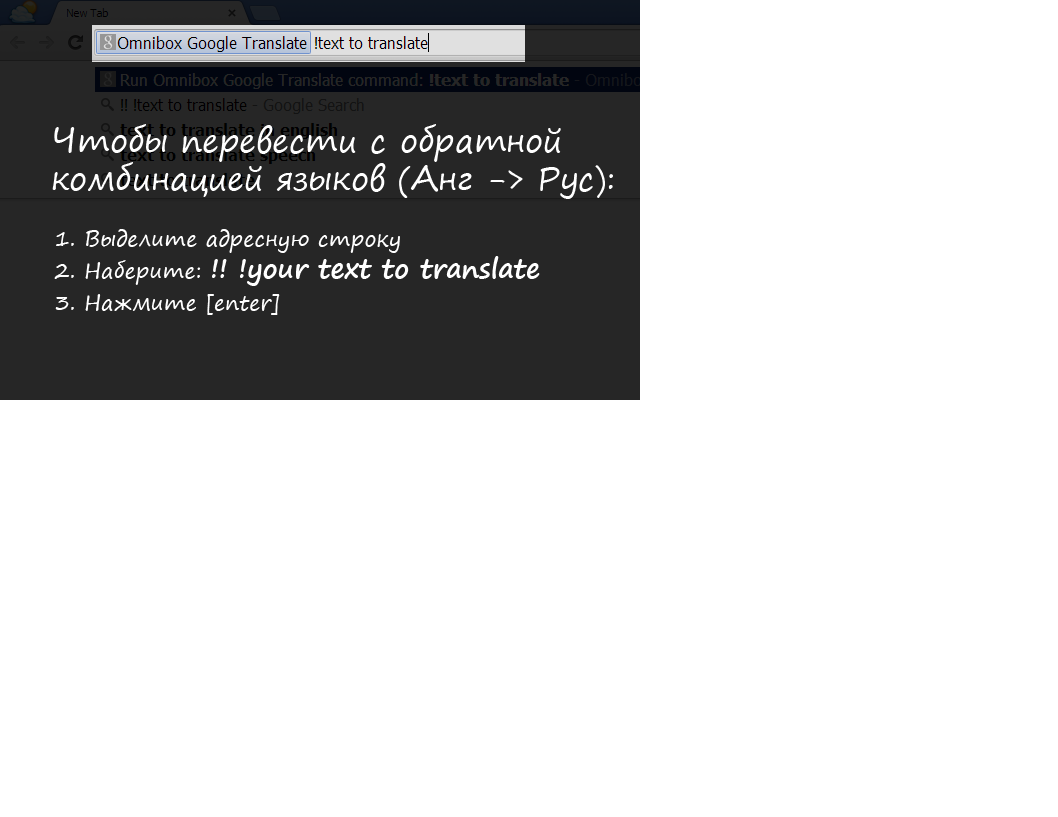
<style>
.page{position:relative;width:1058px;height:817px;background:#ffffff}
.page>*{position:absolute;margin:0}
.t1{font:32px "SegoePrint";color:#ffffff}
.t2{font:21.3px/32px "SegoePrint";color:#ffffff}
.t3{font:26.7px/32px "SegoePrint-Bold";color:#ffffff}
</style>
<div class="page">
<p class="t1" style="left:52px;top:124px;width:561px;height:75px">Чтобы перевести с обратной <br>комбинацией языков (Анг -&gt; Рус):</p>
<p class="t2" style="left:54px;top:229px;width:486px;height:86px">1. Выделите адресную строку<br>2. Наберите: <span class="t3">!! !your text to translate<br></span>3. Нажмите [enter]</p>
</div>
